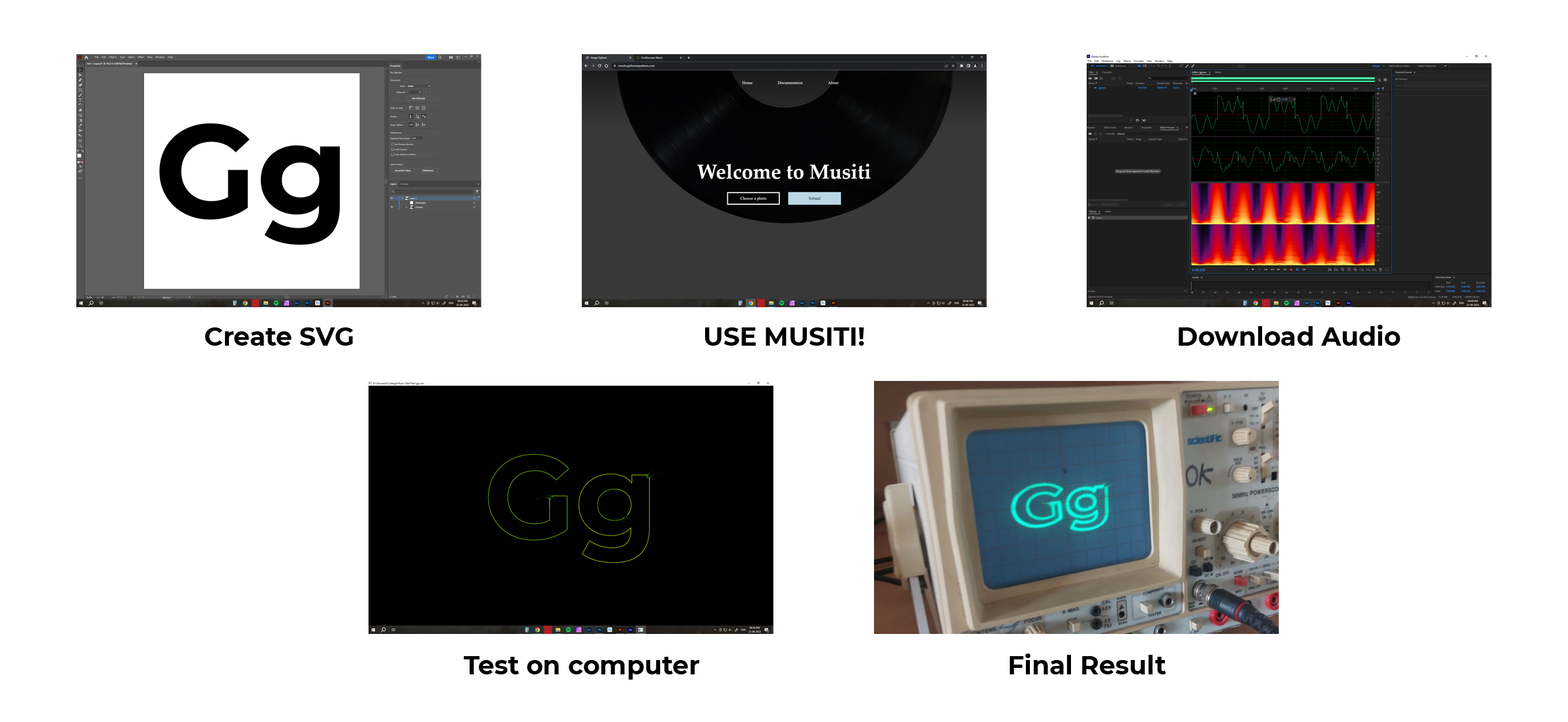
<style>
.page{position:relative;width:1568px;height:722px;background:#ffffff}
.page>*{position:absolute;margin:0}
.t1{font:25.6px "Montserrat-Bold";color:#000000}
</style>
<div class="page">
<p class="t1" style="left:205px;top:327px;width:149px;height:19px">Create SVG</p>
<p class="t1" style="left:705px;top:327px;width:159px;height:19px">USE MUSITI!</p>
<p class="t1" style="left:1179px;top:325px;width:221px;height:21px">Download Audio</p>
<p class="t1" style="left:1010px;top:654px;width:156px;height:20px">Final Result</p>
<p class="t1" style="left:464px;top:656px;width:235px;height:24px">Test on computer</p>
</div>
